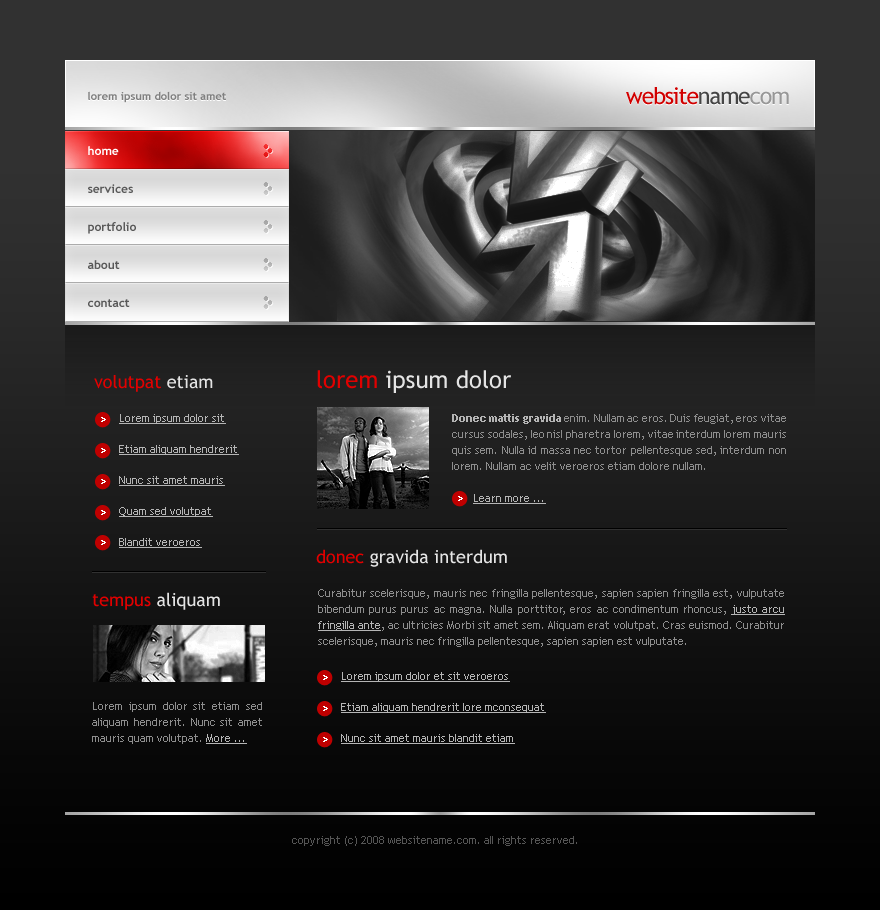
<style>
.page{position:relative;width:880px;height:910px}
.page>*{position:absolute;margin:0}
.t1{font:23px "TrebuchetMS";letter-spacing:-0.05em;color:#d10000}
.t2{font:23px "TrebuchetMS";letter-spacing:-0.05em;color:#454545}
.t3{font:23px "TrebuchetMS";letter-spacing:-0.05em;color:#979797}
.t4{font:11px "TrebuchetMS-Bold";color:#808080}
.t5{font:12px/38px "TrebuchetMS-Bold";color:#595959}
.t6{font:12px/38px "TrebuchetMS-Bold";color:#ffffff}
.t7{font:18px "TrebuchetMS";color:#e10000}
.t8{font:18px "TrebuchetMS";color:#e4e4e4}
.t9{font:24px "TrebuchetMS";color:#e4e4e4}
.t10{font:24px "TrebuchetMS";color:#e10000}
.t11{font:11px/31px "TrebuchetMS";color:#b5b5b5;text-decoration:underline}
.t12{font:11px/16px "TrebuchetMS";color:#8e8e8e}
.t13{font:11px/16px "TrebuchetMS-Bold";color:#b5b5b5}
.t14{font:11px/16px "TrebuchetMS";color:#b5b5b5;text-decoration:underline}
.t15{font:11px "TrebuchetMS";color:#565656}
</style>
<div class="page">
<p class="t1" style="left:626px;top:87px;width:163px;height:18px">website<span class="t2">name</span><span class="t3">com</span></p>
<p class="t4" style="left:88px;top:91px;width:138px;height:12px">lorem ipsum dolor sit amet</p>
<p class="t5" style="left:88px;top:146px;width:48px;height:161px"><span class="t6">home<br></span>services<br>portfolio<br>about<br>contact</p>
<p class="t7" style="left:94px;top:375px;width:119px;height:17px">volutpat <span class="t8">etiam</span></p>
<p class="t9" style="left:317px;top:370px;width:194px;height:23px"><span class="t10">lorem </span>ipsum dolor</p>
<p class="t11" style="left:119px;top:414px;width:120px;height:134px">Lorem ipsum dolor sit<br>Etiam aliquam hendrerit<br>Nunc sit amet mauris<br>Quam sed volutpat<br>Blandit veroeros</p>
<p class="t12" style="left:452px;top:414px;width:334px;height:90px;text-align:justify"><span class="t13">Donec mattis gravida</span> enim. Nullam ac eros. Duis feugiat, eros vitae cursus sodales, leo nisl pharetra lorem, vitae interdum lorem mauris quis sem. Nulla id massa nec tortor pellentesque sed, interdum non lorem. Nullam ac velit veroeros etiam dolore nullam.<br><br>       <span class="t14">Learn more ...</span></p>
<p class="t8" style="left:316px;top:549px;width:191px;height:18px"><span class="t7">donec </span>gravida interdum</p>
<p class="t8" style="left:92px;top:592px;width:128px;height:18px"><span class="t7">tempus </span>aliquam</p>
<p class="t12" style="left:318px;top:589px;width:467px;height:58px;text-align:justify">Curabitur scelerisque, mauris nec fringilla pellentesque, sapien sapien fringilla est, vulputate bibendum purus purus ac magna. Nulla porttitor, eros ac condimentum rhoncus, <span class="t14">justo arcu fringilla ante</span>, ac ultricies Morbi sit amet sem. Aliquam erat volutpat. Cras euismod. Curabitur scelerisque, mauris nec fringilla pellentesque, sapien sapien est vulputate.</p>
<p class="t11" style="left:341px;top:672px;width:205px;height:72px">Lorem ipsum dolor et sit veroeros<br>Etiam aliquam hendrerit lore mconsequat<br>Nunc sit amet mauris blandit etiam</p>
<p class="t12" style="left:92px;top:702px;width:170px;height:42px;text-align:justify">Lorem ipsum dolor sit etiam sed aliquam hendrerit. Nunc sit amet mauris quam volutpat. <span class="t14">More ...</span></p>
<p class="t15" style="left:292px;top:836px;width:285px;height:10px">copyright (c) 2008 websitename.com. all rights reserved.</p>
</div>
